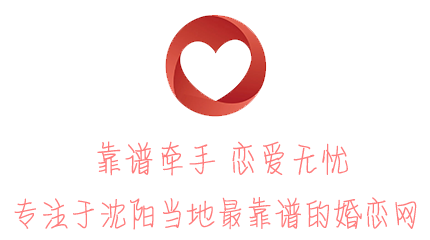
<style>
.page{position:relative;width:430px;height:240px;background:#ffffff}
.page>*{position:absolute;margin:0}
.t1{font:33.1px "MFQingShu_Noncommercial-Regular";letter-spacing:0.08em;color:#ff7c7c;font-weight:bold}
.t2{font:31.4px "MFQingShu_Noncommercial-Regular";letter-spacing:0.08em;color:#ff7c7c;font-weight:bold}
</style>
<div class="page">
<p class="t1" style="left:97px;top:141px;width:251px;height:35px">靠谱牵手 恋爱无忧</p>
<p class="t2" style="left:14px;top:197px;width:403px;height:33px">专注于沈阳当地最靠谱的婚恋网</p>
</div>
